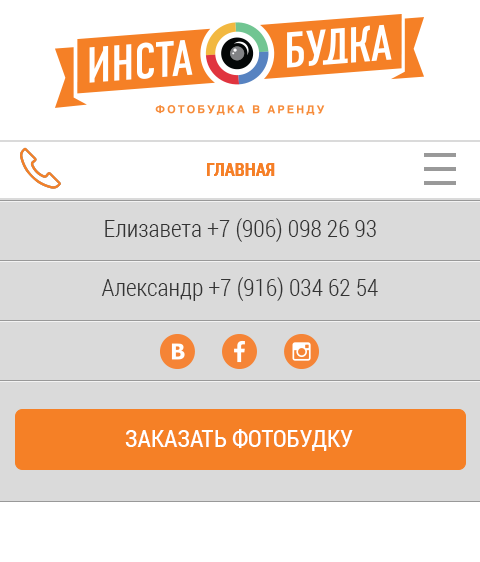
<style>
.page{position:relative;width:480px;height:562px;background:#ffffff}
.page>*{position:absolute;margin:0}
.t1{font:18px "RobotoCondensed-Bold";color:#f58026}
.t2{font:24px/58.9px "RobotoCondensed-Light";color:#333333}
.t3{font:24px "RobotoCondensed-Regular";color:#ffffff;text-transform:uppercase}
</style>
<div class="page">
<p class="t1" style="left:207px;top:163px;width:68px;height:13px">ГЛАВНАЯ</p>
<p class="t1" style="left:207px;top:163px;width:68px;height:13px">ГЛАВНАЯ</p>
<p class="t1" style="left:207px;top:163px;width:68px;height:13px">ГЛАВНАЯ</p>
<p class="t2" style="left:101px;top:218px;width:277px;height:83px">Елизавета +7 (906) 098 26 93<br>Александр +7 (916) 034 62 54</p>
<p class="t3" style="left:125px;top:429px;width:228px;height:22px">заказать фотобудку</p>
</div>
